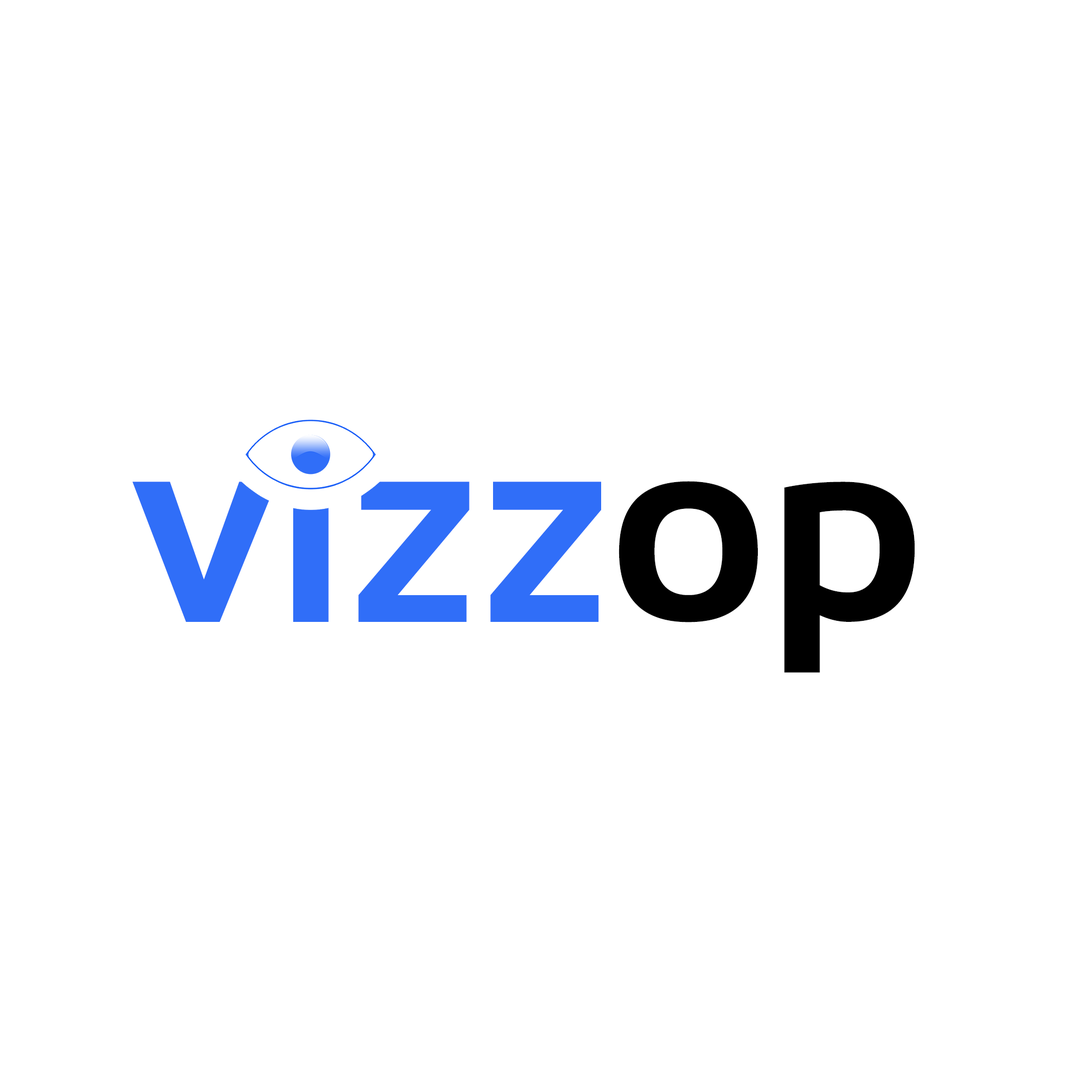
<style>
.page{position:relative;width:1092px;height:1092px;background:#ffffff}
.page>*{position:absolute;margin:0}
.t1{font:273px "Sansation-Bold";color:#306ef8}
.t2{font:273px "Sansation-Bold";color:#000000}
</style>
<div class="page">
<p class="t1" style="left:132px;top:431px;width:783px;height:242px">vizz<span class="t2">op</span></p>
</div>
